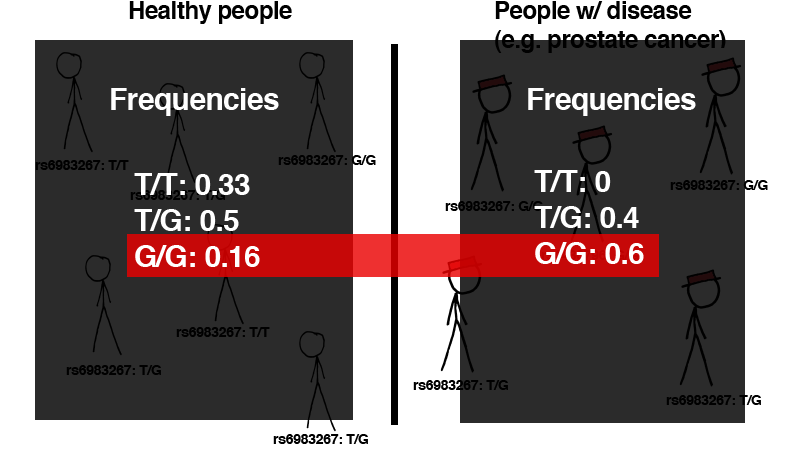
<style>
.page{position:relative;width:800px;height:454px;background:#2b2b2b}
.page>*{position:absolute;margin:0}
.t1{font:24px "Helvetica-Bold";letter-spacing:-0.02em;color:#000000}
.t2{font:30px "Helvetica-Bold";letter-spacing:-0.02em;color:#ffffff}
.t3{font:14px "Helvetica-Bold";letter-spacing:-0.02em;color:#000000}
</style>
<div class="page">
<p class="t1" style="left:129px;top:1px;width:163px;height:23px">Healthy people</p>
<p class="t1" style="left:495px;top:1px;width:231px;height:52px">People w/ disease<br>(e.g. prostate cancer)</p>
<p class="t2" style="left:111px;top:88px;width:168px;height:28px">Frequencies</p>
<p class="t2" style="left:528px;top:88px;width:168px;height:28px">Frequencies</p>
<p class="t3" style="left:35px;top:160px;width:94px;height:10px">rs6983267: T/T</p>
<p class="t3" style="left:278px;top:155px;width:98px;height:10px">rs6983267: G/G</p>
<p class="t2" style="left:134px;top:173px;width:126px;height:94px">T/T: 0.33<br>T/G: 0.5<br>G/G: 0.16</p>
<p class="t2" style="left:534px;top:170px;width:110px;height:94px">T/T: 0<br>T/G: 0.4<br>G/G: 0.6</p>
<p class="t3" style="left:670px;top:180px;width:98px;height:10px">rs6983267: G/G</p>
<p class="t3" style="left:445px;top:201px;width:98px;height:10px">rs6983267: G/G</p>
<p class="t3" style="left:176px;top:327px;width:94px;height:10px">rs6983267: T/T</p>
<p class="t3" style="left:66px;top:365px;width:95px;height:10px">rs6983267: T/G</p>
<p class="t3" style="left:413px;top:380px;width:95px;height:10px">rs6983267: T/G</p>
<p class="t3" style="left:666px;top:395px;width:95px;height:10px">rs6983267: T/G</p>
<p class="t3" style="left:273px;top:434px;width:95px;height:10px">rs6983267: T/G</p>
</div>
